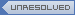
<style>
.page{position:relative;width:75px;height:15px;background:#5176b5}
.page>*{position:absolute;margin:0}
.t1{font:8px "BitDustTwo";color:#666666}
</style>
<div class="page">
<p class="t1" style="left:11px;top:5px;width:59px;height:5px">UNRESOLVED</p>
</div>
